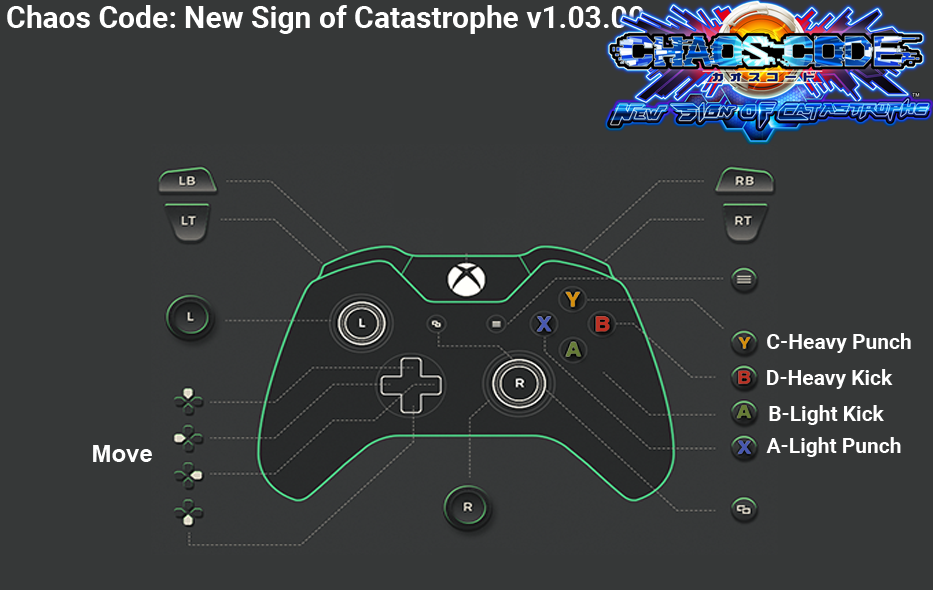
<style>
.page{position:relative;width:933px;height:590px;background:#363838}
.page>*{position:absolute;margin:0}
.t1{font:30px "Roboto-Bold";color:#ffffff}
.t2{font:21px "Roboto-Bold";color:#ffffff}
.t3{font:24px "Arial-BoldMT";color:#fefefe}
</style>
<div class="page">
<p class="t1" style="left:7px;top:5px;width:637px;height:29px">Chaos Code: New Sign of Catastrophe v1.03.00</p>
<p class="t2" style="left:767px;top:333px;width:144px;height:20px">C-Heavy Punch</p>
<p class="t2" style="left:767px;top:369px;width:126px;height:20px">D-Heavy Kick</p>
<p class="t2" style="left:769px;top:405px;width:115px;height:20px">B-Light Kick</p>
<p class="t2" style="left:766px;top:437px;width:135px;height:20px">A-Light Punch</p>
<p class="t3" style="left:93px;top:445px;width:59px;height:17px">Move</p>
</div>
